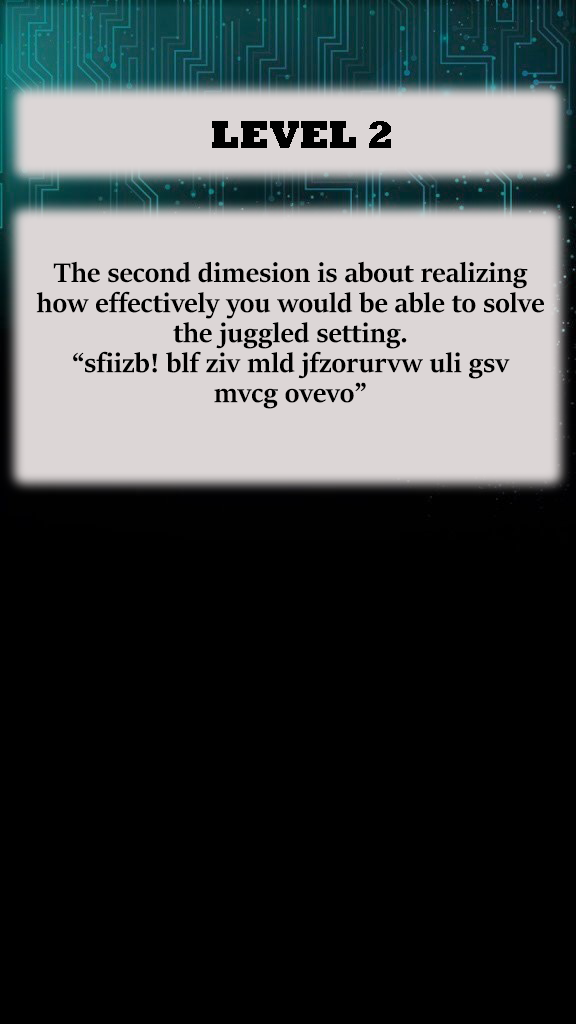
<style>
.page{position:relative;width:576px;height:1024px;background:#000000}
.page>*{position:absolute;margin:0}
.t1{font:40px "Rockwell-ExtraBold";color:#000000}
.t2{font:30px/10px "SitkaBanner-Bold";color:#000000}
</style>
<div class="page">
<p class="t1" style="left:212px;top:121px;width:179px;height:27px">LEVEL 2</p>
<p class="t2" style="left:36px;top:261px;width:508px;height:148px;text-align:center">The second dimesion is about realizing<br><br><br>how effectively you would be able to solve <br><br><br>the juggled setting.<br><br><br>“sfiizb! blf ziv mld jfzorurvw uli gsv <br><br><br>mvcg ovevo”</p>
</div>
